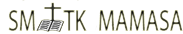
<style>
.page{position:relative;width:183px;height:34px;background:#ffffff}
.page>*{position:absolute;margin:0}
.t1{font:31.3px "MyriadPro-Regular";scale:0.69 1}
.t2{font:31.3px "MyriadPro-Regular";color:#595942;scale:0.69 1}
.t3{font:31.3px "MyriadPro-Regular";color:#5f5f47;scale:0.69 1}
</style>
<div class="page">
<p class="t1" style="left:8px;top:10px;width:27px;height:21px">SM</p>
<p class="t2" style="left:63px;top:10px;width:24px;height:21px">TK</p>
<p class="t3" style="left:99px;top:10px;width:84px;height:21px">MAMASA</p>
</div>
